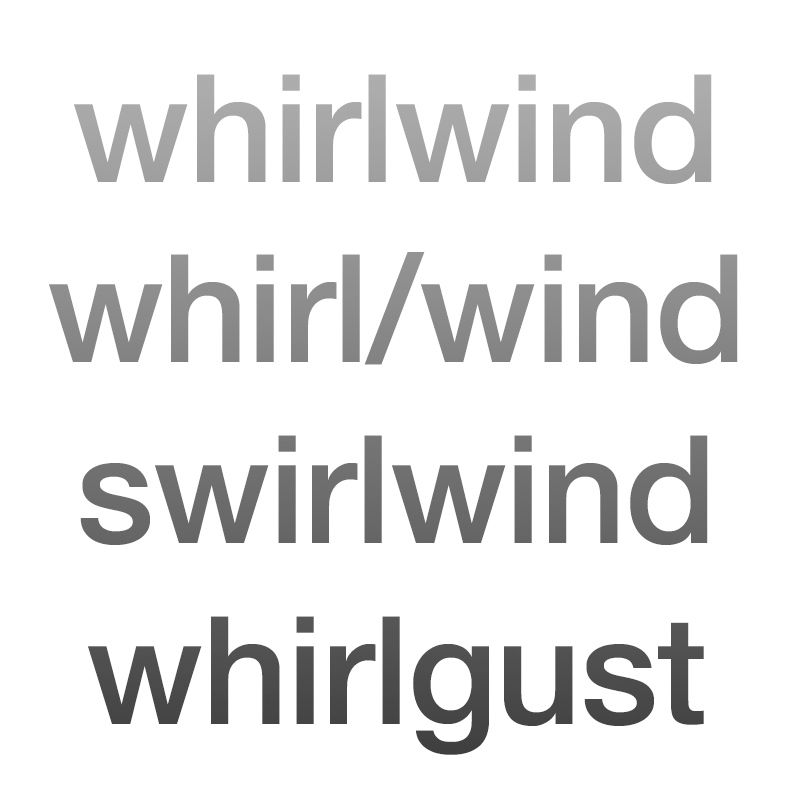
<style>
.page{position:relative;width:800px;height:800px;background:#ffffff}
.page>*{position:absolute;margin:0}
.t1{font:150.5px "HelveticaNeue-Medium";letter-spacing:-0.01em}
</style>
<div class="page">
<p class="t1" style="left:49px;top:74px;width:689px;height:681px;text-align:center">whirlwind<br>whirl/wind<br>swirlwind<br>whirlgust</p>
</div>
